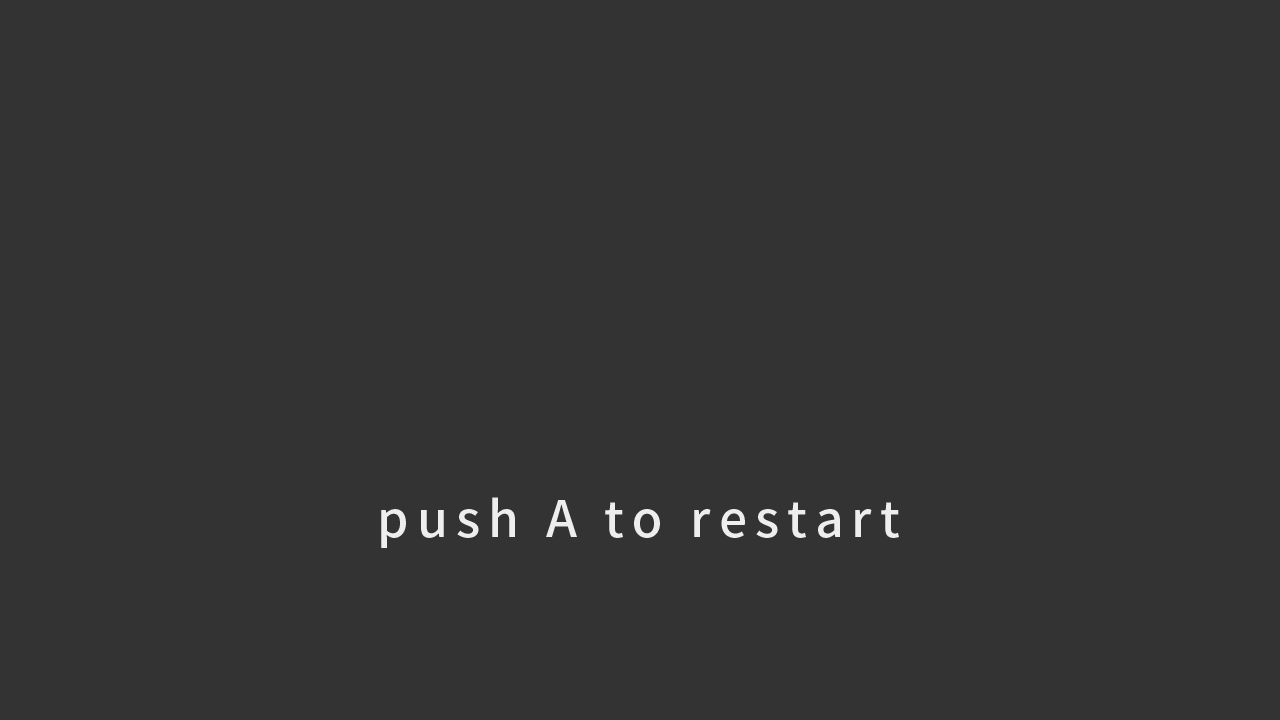
<style>
.page{position:relative;width:1280px;height:720px;background:#333333}
.page>*{position:absolute;margin:0}
.t1{font:50px "SourceHanSansJP-Medium";letter-spacing:0.16em;color:#eeeeee}
</style>
<div class="page">
<p class="t1" style="left:381px;top:497px;width:518px;height:51px">push A to restart</p>
</div>
